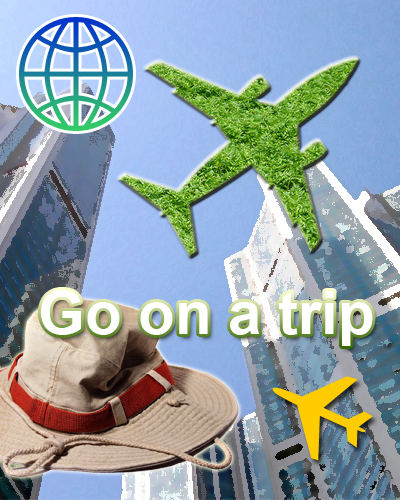
<style>
.page{position:relative;width:400px;height:500px}
.page>*{position:absolute;margin:0}
.t1{font:60px "Arial-BoldMT";color:#ffffff}
</style>
<div class="page">
<p class="t1" style="left:40px;top:290px;width:333px;height:56px">Go on a trip</p>
</div>
